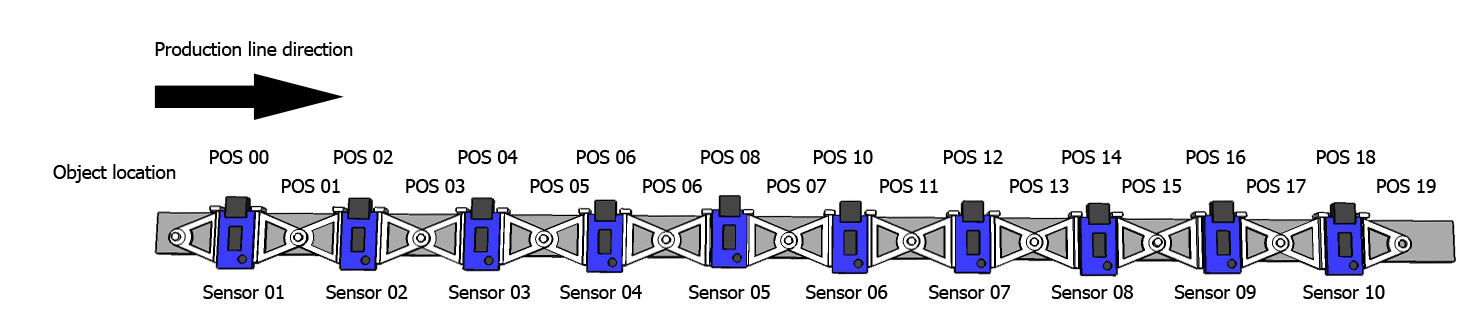
<style>
.page{position:relative;width:1478px;height:333px;background:#ffffff}
.page>*{position:absolute;margin:0}
.t1{font:18.7px "Tahoma";color:#000000}
</style>
<div class="page">
<p class="t1" style="left:155px;top:41px;width:198px;height:15px">Production line direction</p>
<p class="t1" style="left:210px;top:150px;width:1166px;height:14px">POS 00           POS 02           POS 04          POS 06           POS 08         POS 10            POS 12          POS 14           POS 16            POS 18</p>
<p class="t1" style="left:53px;top:164px;width:123px;height:19px">Object location</p>
<p class="t1" style="left:282px;top:179px;width:1154px;height:14px">POS 01           POS 03           POS 05         POS 06           POS 07         POS 11            POS 13         POS 15           POS 17            POS 19</p>
<p class="t1" style="left:203px;top:285px;width:1182px;height:14px">Sensor 01       Sensor 02       Sensor 03     Sensor 04        Sensor 05      Sensor 06       Sensor 07       Sensor 08       Sensor 09        Sensor 10</p>
</div>
